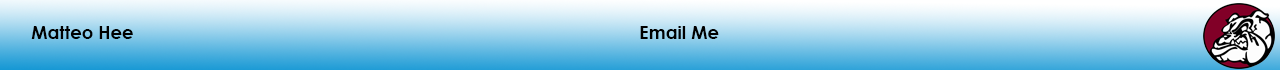
<style>
.page{position:relative;width:1280px;height:70px}
.page>*{position:absolute;margin:0}
.t1{font:18px "CenturyGothic-Bold";color:#000000}
.t2{font:14px "CenturyGothic-Bold";color:#000000}
</style>
<div class="page">
<p class="t1" style="left:31px;top:26px;width:688px;height:13px"><span class="t2">   </span>Matteo Hee               Email Me</p>
</div>
